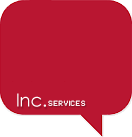
<style>
.page{position:relative;width:132px;height:137px;background:#b91631}
.page>*{position:absolute;margin:0}
.t1{font:18px "CenturyGothic";color:#ffffff}
.t2{font:11px "HaxrCorp 4088 Caps";color:#ffffff}
</style>
<div class="page">
<p class="t1" style="left:17px;top:93px;width:29px;height:14px">Inc.</p>
<p class="t2" style="left:48px;top:100px;width:38px;height:6px">services</p>
</div>
